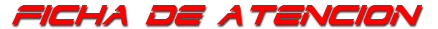
<style>
.page{position:relative;width:438px;height:29px;background:#ffffff}
.page>*{position:absolute;margin:0}
.t1{font:31.9px "DodgerCondensedItalic";color:#ff0000;font-weight:bold}
</style>
<div class="page">
<p class="t1" style="left:12px;top:5px;width:410px;height:20px">FICHA DE ATENCION</p>
</div>
